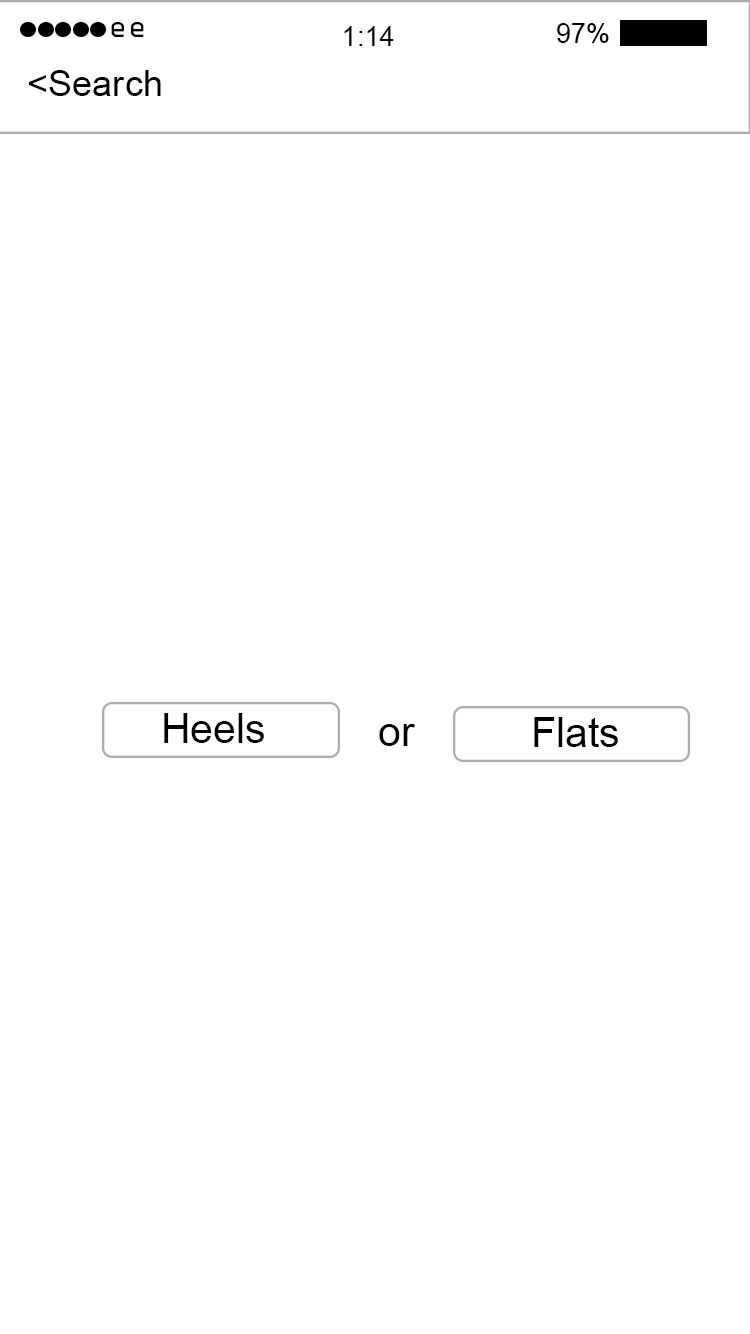
<style>
.page{position:relative;width:750px;height:1334px;background:#ffffff}
.page>*{position:absolute;margin:0}
.t1{font:27.2px "OCRAStd";color:#000000}
.t2{font:27.2px "ArialMT";color:#000000}
.t3{font:36.2px "ArialMT";color:#000000}
.t4{font:40.8px "ArialMT";color:#000000}
</style>
<div class="page">
<p class="t1" style="left:111px;top:22px;width:33px;height:15px">ee</p>
<p class="t2" style="left:344px;top:26px;width:50px;height:20px">1:14</p>
<p class="t2" style="left:557px;top:23px;width:52px;height:20px">97%</p>
<p class="t3" style="left:29px;top:70px;width:132px;height:26px">&lt;Search</p>
<p class="t4" style="left:164px;top:713px;width:100px;height:30px">Heels</p>
<p class="t4" style="left:379px;top:724px;width:37px;height:22px">or</p>
<p class="t4" style="left:534px;top:717px;width:84px;height:30px">Flats</p>
</div>
